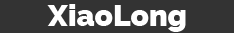
<style>
.page{position:relative;width:234px;height:33px;background:#333333}
.page>*{position:absolute;margin:0}
.t1{font:30px "Raleway-Heavy";color:#ffffff}
</style>
<div class="page">
<p class="t1" style="left:47px;top:4px;width:139px;height:28px">XiaoLong</p>
</div>
